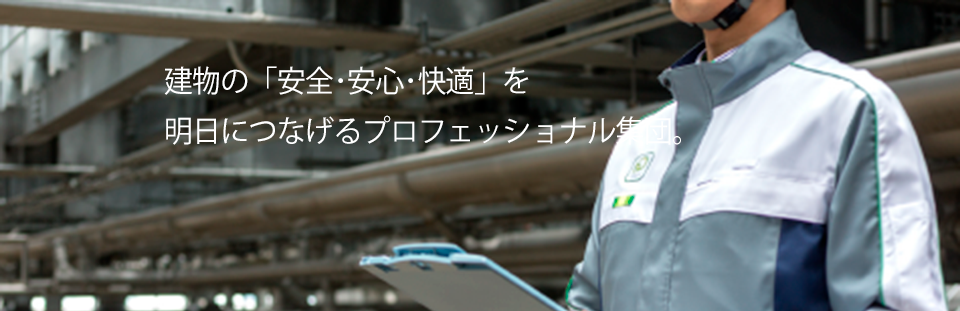
<style>
.page{position:relative;width:960px;height:311px}
.page>*{position:absolute;margin:0}
.t1{font:30px/25px "KozGoPr6N-Regular";letter-spacing:-0.02em;color:#ffffff;scale:0.96 1}
</style>
<div class="page">
<p class="t1" style="left:164px;top:66px;width:517px;height:79px">建物の「安全･安心･快適」を<br><br>明日につなげるプロフェッショナル集団。</p>
</div>
